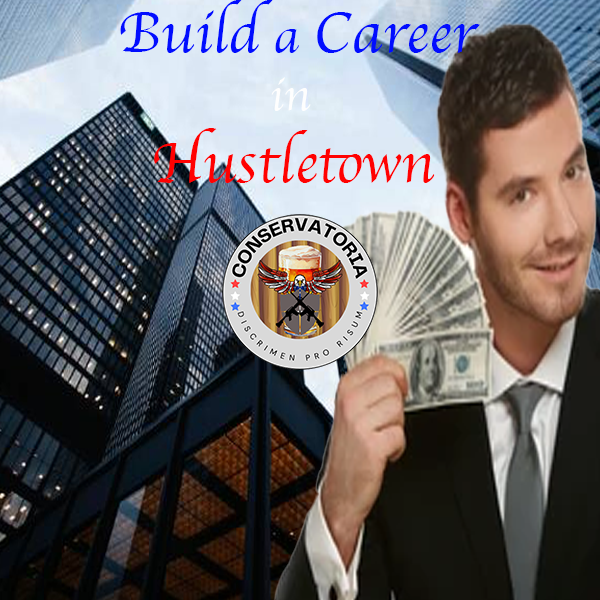
<style>
.page{position:relative;width:600px;height:600px}
.page>*{position:absolute;margin:0}
.t1{font:60px "Apple-Chancery";letter-spacing:0.003em;color:#ff0101}
.t2{font:60px "Apple-Chancery";letter-spacing:0.003em;color:#010dff}
.t3{font:50px "Apple-Chancery";letter-spacing:0.003em;color:#010dff}
.t4{font:48px "Apple-Chancery";letter-spacing:0.003em;color:#fefefe}
</style>
<div class="page">
<p class="t1" style="left:120px;top:0px;width:360px;height:183px"><span class="t2">Build</span><span class="t3"> a </span><span class="t2">Career<br>               </span><span class="t4">in<br></span>  Hustletown</p>
</div>
